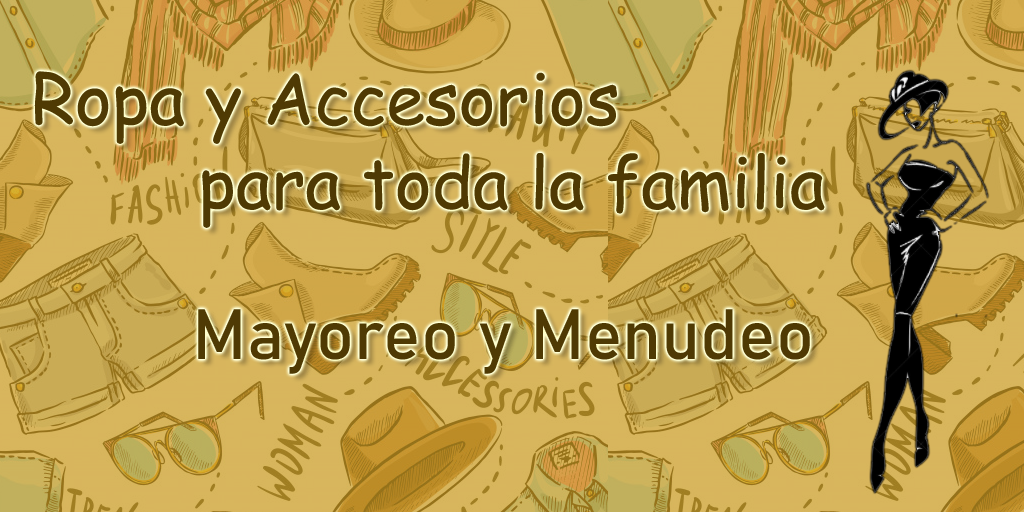
<style>
.page{position:relative;width:1024px;height:512px}
.page>*{position:absolute;margin:0}
.t1{font:70px "ComicSansMS";color:#4f3a04}
.t2{font:70px "Bahnschrift";color:#4f3a04}
</style>
<div class="page">
<p class="t1" style="left:34px;top:71px;width:791px;height:157px">Ropa y Accesorios <br>        para toda la familia</p>
<p class="t2" style="left:198px;top:309px;width:612px;height:65px">Mayoreo y Menudeo</p>
</div>
